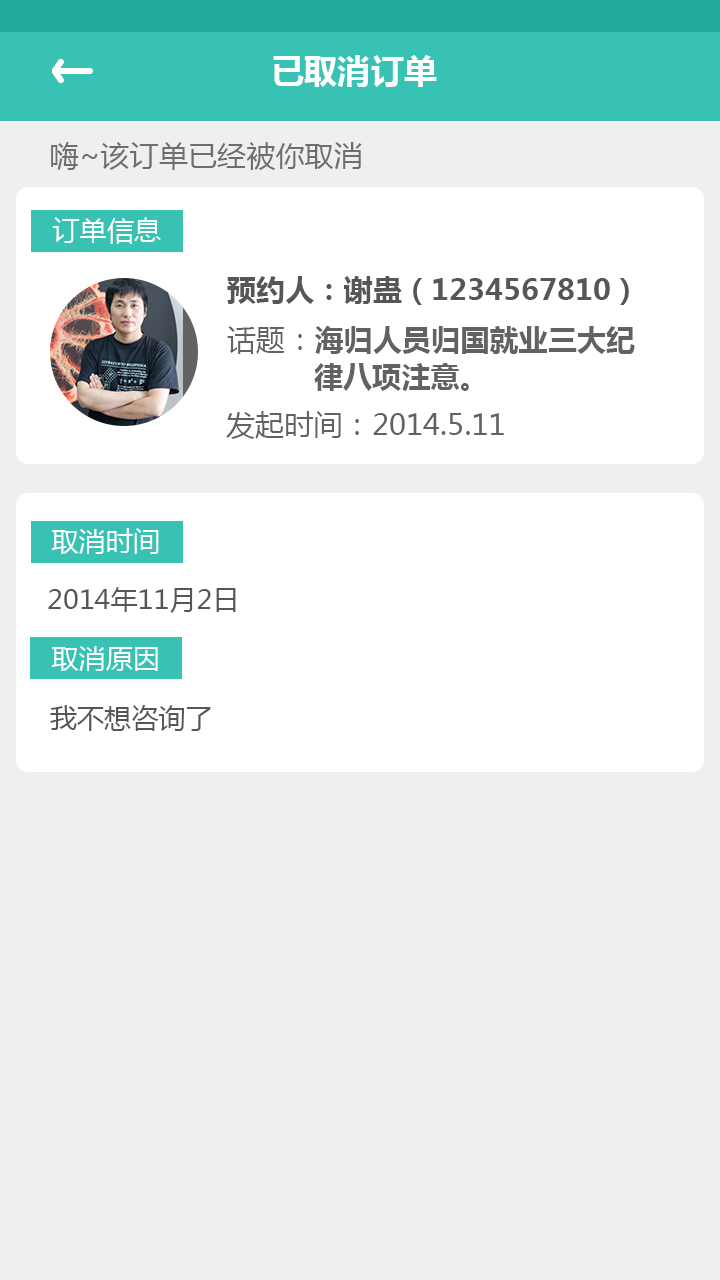
<style>
.page{position:relative;width:720px;height:1280px;background:#efefef}
.page>*{position:absolute;margin:0}
.t1{font:33.3px "MicrosoftYaHei-Bold";color:#fefefe}
.t2{font:29.2px "MicrosoftYaHei";color:#6e6e6e}
.t3{font:27.1px "MicrosoftYaHei";color:#fefefe}
.t4{font:29.2px "MicrosoftYaHei-Bold";color:#565656}
.t5{font:29.2px/37.5px "MicrosoftYaHei-Bold";color:#626262}
.t6{font:29.2px/37.5px "MicrosoftYaHei";color:#626262}
.t7{font:29.2px "MicrosoftYaHei";color:#626262}
.t8{font:27.1px "MicrosoftYaHei";color:#565656}
</style>
<div class="page">
<p class="t1" style="left:273px;top:55px;width:164px;height:32px">已取消订单</p>
<p class="t2" style="left:51px;top:142px;width:311px;height:28px">嗨~该订单已经被你取消</p>
<p class="t3" style="left:52px;top:217px;width:109px;height:27px">订单信息</p>
<p class="t4" style="left:227px;top:276px;width:402px;height:29px">预约人：谢蛊（1234567810）</p>
<p class="t5" style="left:227px;top:326px;width:408px;height:65px"><span class="t6">话题：</span>海归人员归国就业三大纪<br>          律八项注意。</p>
<p class="t7" style="left:226px;top:411px;width:278px;height:28px">发起时间：2014.5.11</p>
<p class="t3" style="left:51px;top:528px;width:108px;height:26px">取消时间</p>
<p class="t8" style="left:48px;top:587px;width:188px;height:26px">2014年11月2日</p>
<p class="t3" style="left:51px;top:646px;width:107px;height:25px">取消原因</p>
<p class="t8" style="left:50px;top:705px;width:161px;height:26px">我不想咨询了</p>
</div>
